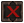
<style>
.page{position:relative;width:24px;height:23px}
.page>*{position:absolute;margin:0}
.t1{font:16px "Fontin-Regular";color:#a3110e;scale:1.62 1}
</style>
<div class="page">
<p class="t1" style="left:6px;top:6px;width:14px;height:11px">X</p>
</div>
